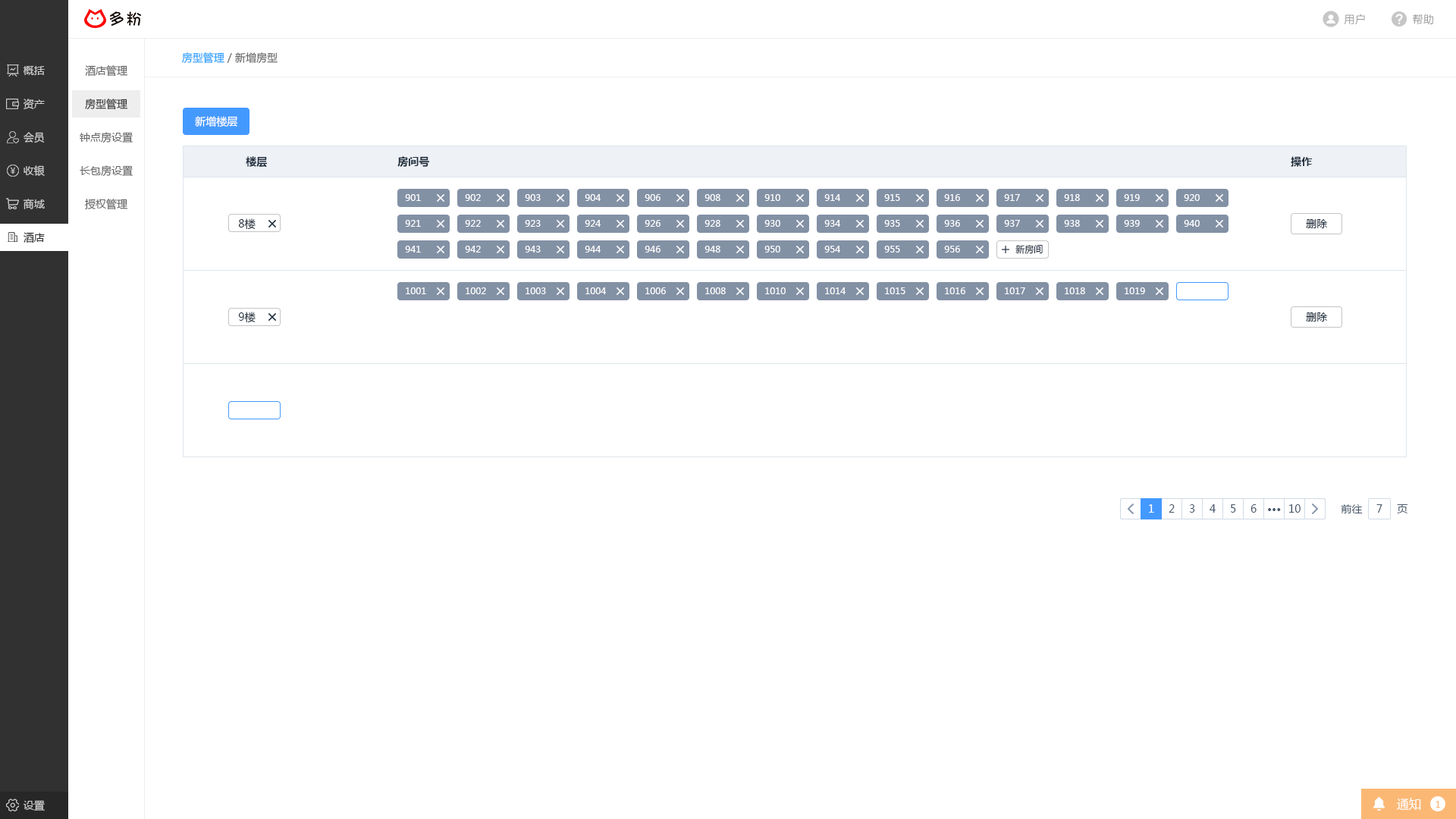
<style>
.page{position:relative;width:1456px;height:819px;background:#ffffff}
.page>*{position:absolute;margin:0}
.t1{font:10.6px "MicrosoftYaHei";letter-spacing:0.025em;color:#999999}
.t2{font:10.6px "MicrosoftYaHei";color:#666666}
.t3{font:10.6px "MicrosoftYaHei";color:#20a0ff}
.t4{font:10.6px "MicrosoftYaHei";color:#cccccc}
.t5{font:10.6px "MicrosoftYaHei";color:#333333}
.t6{font:10.6px "MicrosoftYaHei";color:#ffffff}
.t7{font:10.6px "MicrosoftYaHei-Bold";color:#1f2d3d}
.t8{font:9.1px "MicrosoftYaHei";color:#ffffff}
.t9{font:10.6px "MicrosoftYaHei";color:#1f2d3d}
.t10{font:10.6px "MicrosoftYaHei";color:#313131}
.t11{font:9.1px "MicrosoftYaHei";color:#1f2d3d}
.t12{font:10.6px "MicrosoftYaHei";color:#48576a}
.t13{font:10.6px "MicrosoftYaHei-Bold";color:#48576a}
.t14{font:12.1px "MicrosoftYaHei";color:#ffffff}
.t15{font:9.1px "MicrosoftYaHei";color:#fbb875}
</style>
<div class="page">
<p class="t1" style="left:1344px;top:14px;width:21px;height:11px">用户</p>
<p class="t1" style="left:1413px;top:14px;width:20px;height:11px">帮助</p>
<p class="t2" style="left:182px;top:52px;width:96px;height:12px"><span class="t3">房型管理</span> / 新增房型</p>
<p class="t4" style="left:23px;top:66px;width:22px;height:9px">概括</p>
<p class="t2" style="left:85px;top:65px;width:42px;height:12px">酒店管理</p>
<p class="t4" style="left:24px;top:99px;width:21px;height:10px">资产</p>
<p class="t5" style="left:85px;top:99px;width:42px;height:11px">房型管理</p>
<p class="t6" style="left:195px;top:116px;width:43px;height:11px">新增楼层</p>
<p class="t4" style="left:24px;top:132px;width:21px;height:11px">会员</p>
<p class="t2" style="left:80px;top:132px;width:53px;height:11px">钟点房设置</p>
<p class="t7" style="left:246px;top:156px;width:21px;height:12px">楼层</p>
<p class="t7" style="left:397px;top:156px;width:32px;height:11px">房间号</p>
<p class="t7" style="left:1291px;top:156px;width:21px;height:11px">操作</p>
<p class="t4" style="left:24px;top:165px;width:21px;height:11px">收银</p>
<p class="t2" style="left:80px;top:165px;width:53px;height:12px">长包房设置</p>
<p class="t8" style="left:405px;top:194px;width:16px;height:7px">901</p>
<p class="t8" style="left:465px;top:194px;width:16px;height:7px">902</p>
<p class="t8" style="left:525px;top:194px;width:16px;height:7px">903</p>
<p class="t8" style="left:585px;top:194px;width:16px;height:7px">904</p>
<p class="t8" style="left:645px;top:194px;width:15px;height:7px">906</p>
<p class="t8" style="left:704px;top:194px;width:16px;height:7px">908</p>
<p class="t8" style="left:764px;top:194px;width:16px;height:7px">910</p>
<p class="t8" style="left:824px;top:194px;width:16px;height:7px">914</p>
<p class="t8" style="left:884px;top:194px;width:16px;height:7px">915</p>
<p class="t8" style="left:944px;top:194px;width:16px;height:7px">916</p>
<p class="t8" style="left:1004px;top:194px;width:16px;height:7px">917</p>
<p class="t8" style="left:1064px;top:194px;width:16px;height:7px">918</p>
<p class="t8" style="left:1124px;top:194px;width:16px;height:7px">919</p>
<p class="t8" style="left:1184px;top:194px;width:16px;height:7px">920</p>
<p class="t4" style="left:23px;top:199px;width:22px;height:10px">商城</p>
<p class="t2" style="left:85px;top:199px;width:42px;height:11px">授权管理</p>
<p class="t9" style="left:238px;top:218px;width:18px;height:12px">8楼</p>
<p class="t8" style="left:405px;top:220px;width:16px;height:7px">921</p>
<p class="t8" style="left:465px;top:220px;width:16px;height:7px">922</p>
<p class="t8" style="left:525px;top:220px;width:16px;height:7px">923</p>
<p class="t8" style="left:585px;top:220px;width:16px;height:7px">924</p>
<p class="t8" style="left:645px;top:220px;width:15px;height:7px">926</p>
<p class="t8" style="left:704px;top:220px;width:16px;height:7px">928</p>
<p class="t8" style="left:764px;top:220px;width:16px;height:7px">930</p>
<p class="t8" style="left:824px;top:220px;width:16px;height:7px">934</p>
<p class="t8" style="left:884px;top:220px;width:16px;height:7px">935</p>
<p class="t8" style="left:944px;top:220px;width:16px;height:7px">936</p>
<p class="t8" style="left:1004px;top:220px;width:16px;height:7px">937</p>
<p class="t8" style="left:1064px;top:220px;width:16px;height:7px">938</p>
<p class="t8" style="left:1124px;top:220px;width:16px;height:7px">939</p>
<p class="t8" style="left:1184px;top:220px;width:16px;height:7px">940</p>
<p class="t9" style="left:1306px;top:219px;width:22px;height:9px">删除</p>
<p class="t10" style="left:24px;top:232px;width:21px;height:11px">酒店</p>
<p class="t8" style="left:405px;top:246px;width:16px;height:7px">941</p>
<p class="t8" style="left:465px;top:246px;width:16px;height:7px">942</p>
<p class="t8" style="left:525px;top:246px;width:16px;height:7px">943</p>
<p class="t8" style="left:585px;top:246px;width:16px;height:7px">944</p>
<p class="t8" style="left:645px;top:246px;width:15px;height:7px">946</p>
<p class="t8" style="left:704px;top:246px;width:16px;height:7px">948</p>
<p class="t8" style="left:764px;top:246px;width:16px;height:7px">950</p>
<p class="t8" style="left:824px;top:246px;width:16px;height:7px">954</p>
<p class="t8" style="left:884px;top:246px;width:16px;height:7px">955</p>
<p class="t8" style="left:944px;top:246px;width:16px;height:7px">956</p>
<p class="t11" style="left:1015px;top:245px;width:28px;height:9px">新房间</p>
<p class="t8" style="left:406px;top:287px;width:20px;height:7px">1001</p>
<p class="t8" style="left:466px;top:287px;width:20px;height:7px">1002</p>
<p class="t8" style="left:526px;top:287px;width:20px;height:7px">1003</p>
<p class="t8" style="left:585px;top:287px;width:21px;height:7px">1004</p>
<p class="t8" style="left:645px;top:287px;width:21px;height:7px">1006</p>
<p class="t8" style="left:705px;top:287px;width:21px;height:7px">1008</p>
<p class="t8" style="left:765px;top:287px;width:21px;height:7px">1010</p>
<p class="t8" style="left:825px;top:287px;width:21px;height:7px">1014</p>
<p class="t8" style="left:885px;top:287px;width:20px;height:7px">1015</p>
<p class="t8" style="left:945px;top:287px;width:20px;height:7px">1016</p>
<p class="t8" style="left:1005px;top:287px;width:20px;height:7px">1017</p>
<p class="t8" style="left:1065px;top:287px;width:20px;height:7px">1018</p>
<p class="t8" style="left:1125px;top:287px;width:20px;height:7px">1019</p>
<p class="t9" style="left:238px;top:312px;width:18px;height:11px">9楼</p>
<p class="t9" style="left:1306px;top:312px;width:22px;height:10px">删除</p>
<p class="t6" style="left:1149px;top:504px;width:5px;height:9px">1</p>
<p class="t12" style="left:1169px;top:504px;width:6px;height:9px">2</p>
<p class="t12" style="left:1189px;top:504px;width:6px;height:9px">3</p>
<p class="t12" style="left:1210px;top:504px;width:6px;height:9px">4</p>
<p class="t12" style="left:1231px;top:504px;width:5px;height:9px">5</p>
<p class="t12" style="left:1250px;top:504px;width:7px;height:9px">6</p>
<p class="t13" style="left:1268px;top:508px;width:13px;height:3px">···</p>
<p class="t12" style="left:1289px;top:504px;width:12px;height:9px">10</p>
<p class="t12" style="left:1341px;top:504px;width:22px;height:9px">前往</p>
<p class="t12" style="left:1376px;top:504px;width:6px;height:9px">7</p>
<p class="t12" style="left:1397px;top:504px;width:10px;height:9px">页</p>
<p class="t14" style="left:1397px;top:798px;width:24px;height:12px">通知</p>
<p class="t4" style="left:23px;top:800px;width:22px;height:11px">设置</p>
<p class="t15" style="left:1436px;top:801px;width:5px;height:7px">1</p>
</div>
